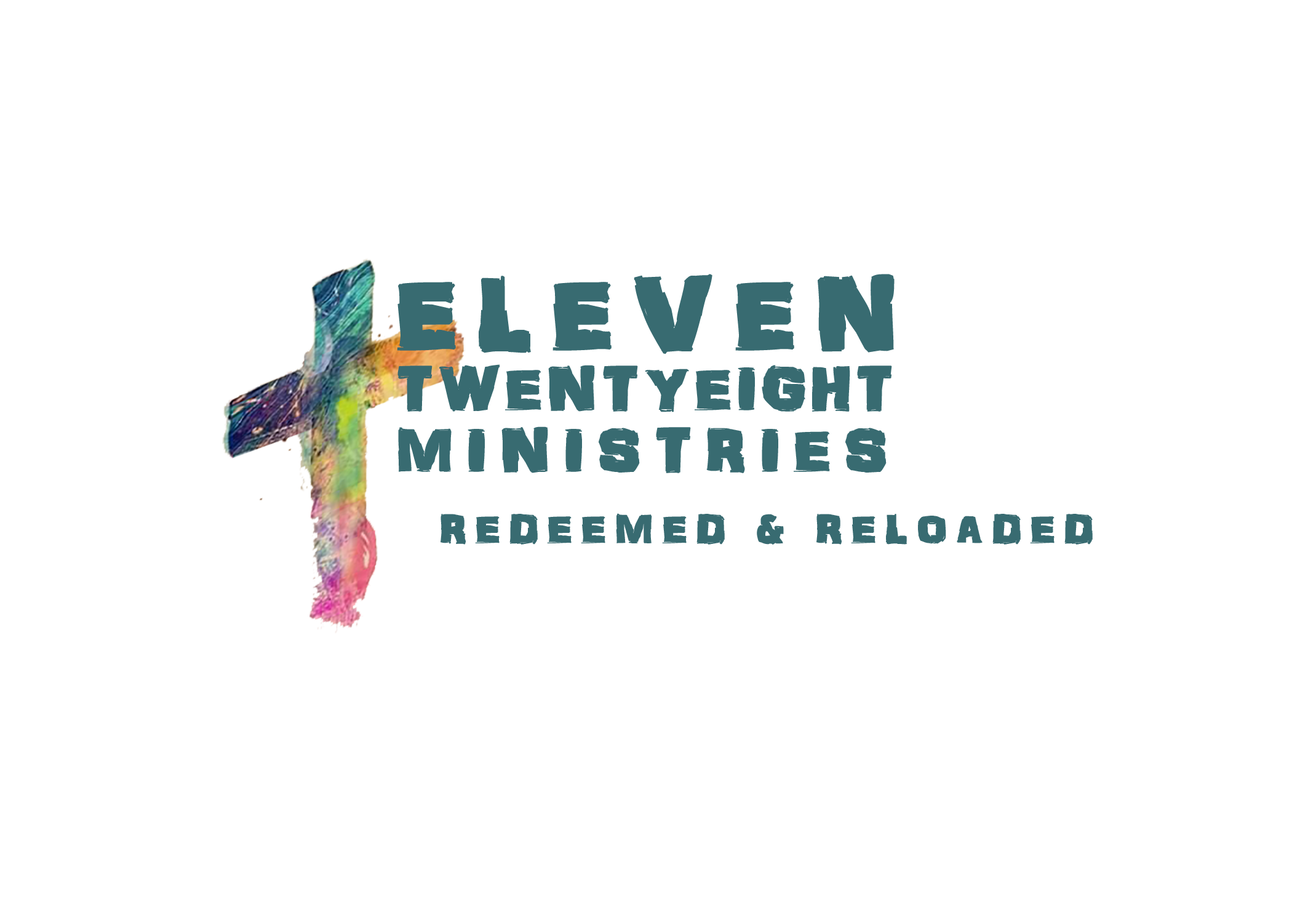
<style>
.page{position:relative;width:1292px;height:923px;background:#ffffff}
.page>*{position:absolute;margin:0}
.t1{font:102.5px "ARDARLING";letter-spacing:0.16em;color:#386b71;font-weight:bold}
.t2{font:61.5px "ARDARLING";letter-spacing:0.055em;color:#386b71;font-weight:bold}
.t3{font:61.5px "ARDARLING";letter-spacing:0.2em;color:#386b71;font-weight:bold}
.t4{font:41px "ARDARLING";letter-spacing:0.2em;color:#386b71;font-weight:bold}
</style>
<div class="page">
<p class="t1" style="left:397px;top:274px;width:498px;height:80px">ELEVEN</p>
<p class="t2" style="left:397px;top:364px;width:495px;height:48px">TWENTYEIGHT</p>
<p class="t3" style="left:398px;top:426px;width:489px;height:47px">MINISTRIES</p>
<p class="t4" style="left:441px;top:513px;width:652px;height:32px">REDEEMED &amp; RELOADED</p>
</div>
